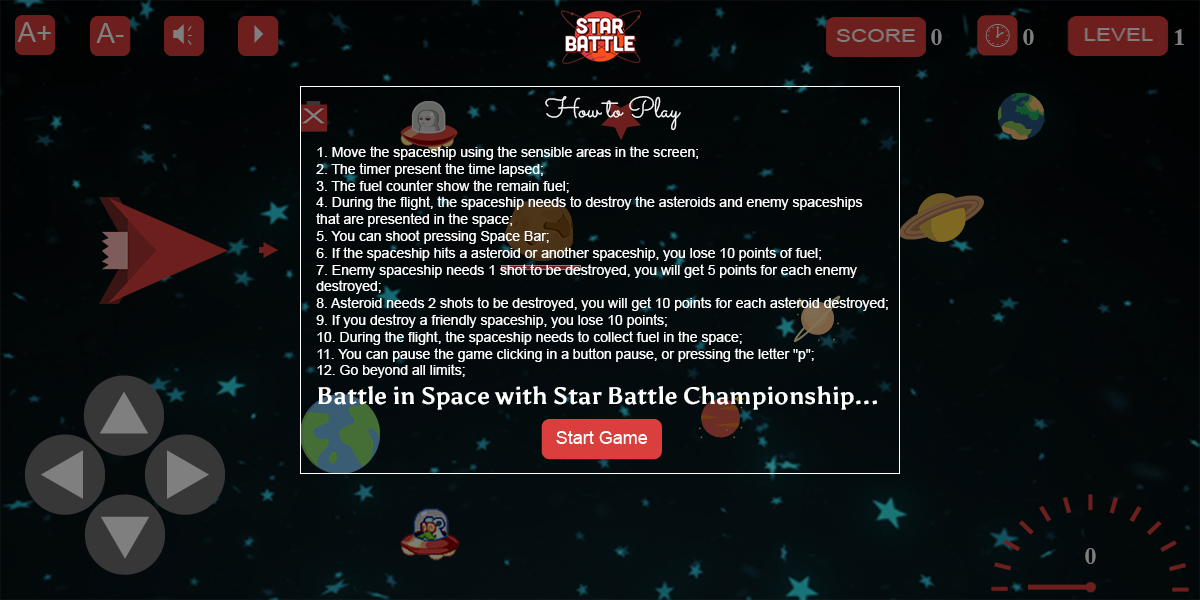
<style>
.page{position:relative;width:1200px;height:600px}
.page>*{position:absolute;margin:0}
.t1{font:24px "TimesNewRomanPS-BoldMT";color:#7f7f7f}
.t2{font:28px "Sacramento-Regular";color:#ffffff}
.t3{font:14px "ArialMT";color:#ffffff}
.t4{font:24px "Asul-Bold";color:#ffffff}
</style>
<div class="page">
<p class="t1" style="left:931px;top:29px;width:11px;height:16px">0</p>
<p class="t1" style="left:1023px;top:29px;width:11px;height:16px">0</p>
<p class="t1" style="left:1175px;top:29px;width:9px;height:16px">1</p>
<p class="t2" style="left:545px;top:96px;width:136px;height:35px">How to Play</p>
<p class="t3" style="left:316px;top:146px;width:572px;height:264px">1. Move the spaceship using the sensible areas in the screen;<br>2. The timer present the time lapsed;<br>3. The fuel counter show the remain fuel;<br>4. During the flight, the spaceship needs to destroy the asteroids and enemy spaceships <br>that are presented in the space;<br>5. You can shoot pressing Space Bar;<br>6. If the spaceship hits a asteroid or another spaceship, you lose 10 points of fuel;<br>7. Enemy spaceship needs 1 shot to be destroyed, you will get 5 points for each enemy <br>destroyed;<br>8. Asteroid needs 2 shots to be destroyed, you will get 10 points for each asteroid destroyed;<br>9. If you destroy a friendly spaceship, you lose 10 points;<br>10. During the flight, the spaceship needs to collect fuel in the space;<br>11. You can pause the game clicking in a button pause, or pressing the letter "p";<br>12. Go beyond all limits;<br><span class="t4">Battle in Space with Star Battle Championship...</span></p>
<p class="t1" style="left:1085px;top:548px;width:11px;height:16px">0</p>
</div>
